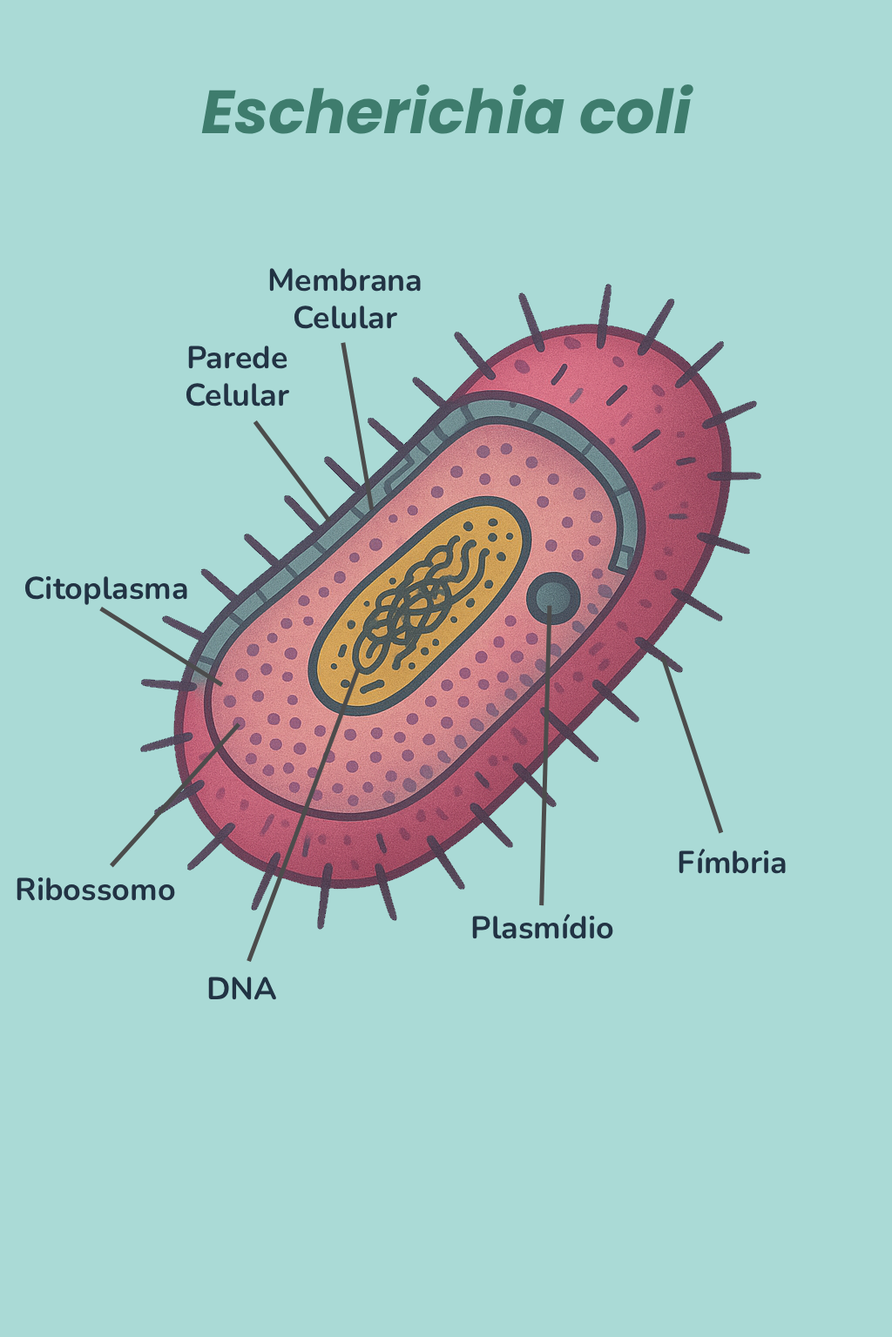
<style>
.page{position:relative;width:892px;height:1337px;background:#aadad6}
.page>*{position:absolute;margin:0}
.t1{font:60.9px "Poppins-BoldItalic";color:#3e7c6d}
.t2{font:31.3px "Nunito-Bold";color:#223344}
</style>
<div class="page">
<p class="t1" style="left:201px;top:84px;width:493px;height:50px">Escherichia coli</p>
<p class="t2" style="left:269px;top:268px;width:152px;height:61px;text-align:center">Membrana Celular</p>
<p class="t2" style="left:185px;top:346px;width:105px;height:61px;text-align:center">Parede Celular</p>
<p class="t2" style="left:24px;top:576px;width:163px;height:29px">Citoplasma</p>
<p class="t2" style="left:678px;top:849px;width:107px;height:25px">Fímbria</p>
<p class="t2" style="left:17px;top:878px;width:158px;height:23px">Ribossomo</p>
<p class="t2" style="left:472px;top:914px;width:141px;height:25px">Plasmídio</p>
<p class="t2" style="left:208px;top:977px;width:69px;height:23px">DNA</p>
</div>
